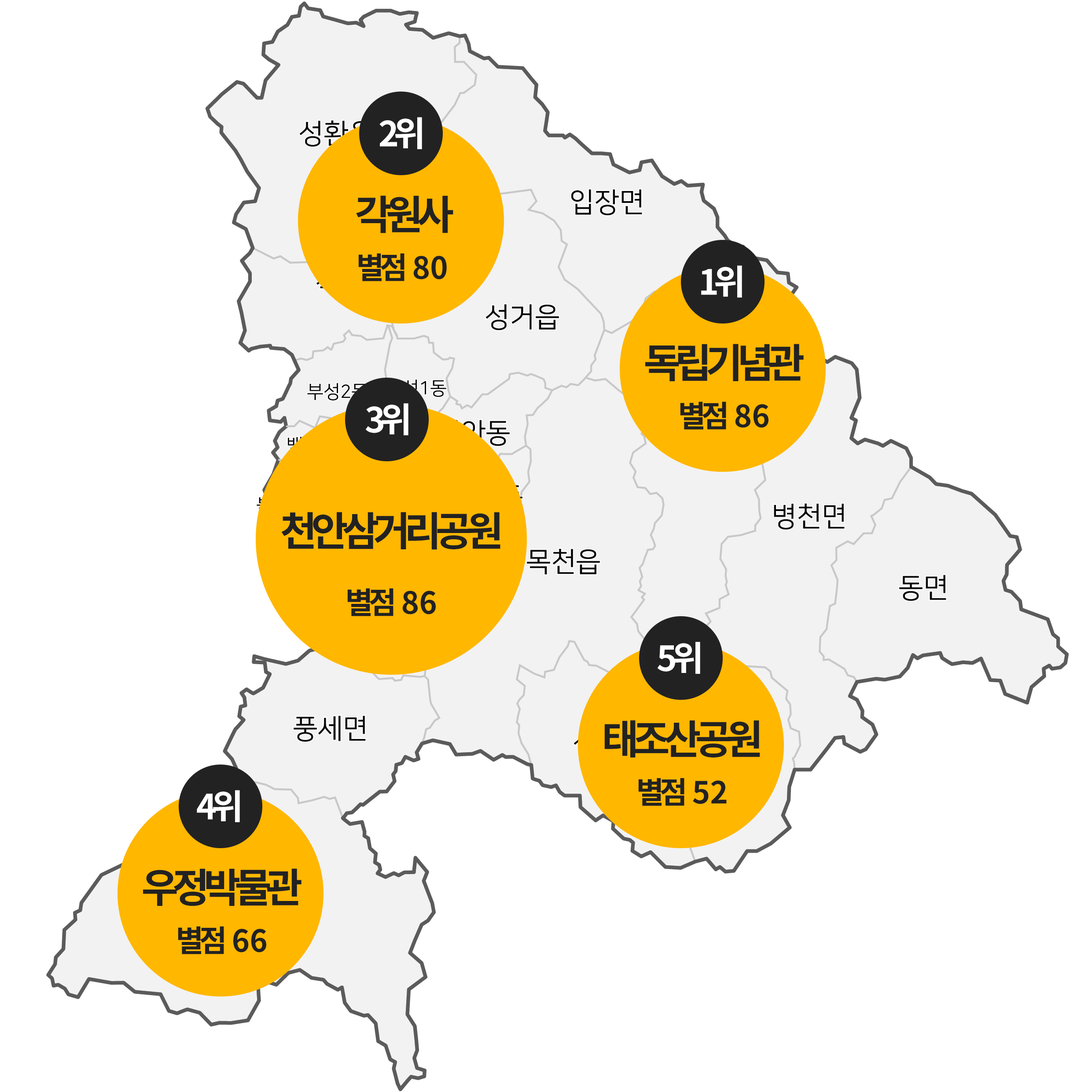
<style>
.page{position:relative;width:1092px;height:1092px;background:#ffffff}
.page>*{position:absolute;margin:0}
.t1{font:34.7px "NotoSansCJKkr-Bold";letter-spacing:-0.15em;color:#ffffff}
.t2{font:40.4px "NotoSansCJKkr-Bold";letter-spacing:-0.15em;color:#222222}
.t3{font:30.4px "NotoSansCJKkr-Bold";letter-spacing:-0.15em;color:#222222}
.t4{font:30.4px "NotoSansCJKkr-Bold";color:#222222}
</style>
<div class="page">
<p class="t1" style="left:379px;top:117px;width:43px;height:32px">2위</p>
<p class="t2" style="left:356px;top:195px;width:97px;height:38px">각원사</p>
<p class="t3" style="left:358px;top:253px;width:89px;height:28px">별점 <span class="t4"> 80</span></p>
<p class="t1" style="left:701px;top:265px;width:41px;height:33px">1위</p>
<p class="t2" style="left:645px;top:344px;width:159px;height:38px">독립기념관</p>
<p class="t3" style="left:680px;top:401px;width:88px;height:29px">별점 <span class="t4"> 86</span></p>
<p class="t1" style="left:366px;top:403px;width:42px;height:32px">3위</p>
<p class="t2" style="left:281px;top:512px;width:219px;height:38px">천안삼거리공원</p>
<p class="t3" style="left:347px;top:588px;width:89px;height:28px">별점 <span class="t4"> 86</span></p>
<p class="t1" style="left:657px;top:642px;width:43px;height:32px">5위</p>
<p class="t2" style="left:604px;top:720px;width:156px;height:37px">태조산공원</p>
<p class="t3" style="left:638px;top:778px;width:89px;height:28px">별점 <span class="t4"> 52</span></p>
<p class="t1" style="left:197px;top:790px;width:43px;height:32px">4위</p>
<p class="t2" style="left:143px;top:868px;width:158px;height:38px">우정박물관</p>
<p class="t3" style="left:178px;top:926px;width:88px;height:28px">별점 <span class="t4"> 66</span></p>
</div>
